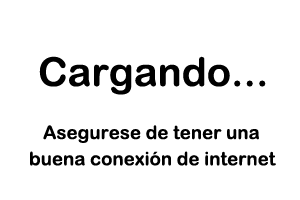
<style>
.page{position:relative;width:300px;height:200px;background:#ffffff}
.page>*{position:absolute;margin:0}
.t1{font:40px "ArialRoundedMTBold";color:#000000}
.t2{font:18.7px "ArialRoundedMTBold";color:#000000}
</style>
<div class="page">
<p class="t1" style="left:39px;top:56px;width:227px;height:39px">Cargando...</p>
<p class="t2" style="left:30px;top:125px;width:246px;height:41px">Asegurese de tener una<br>buena conexión de internet</p>
</div>
